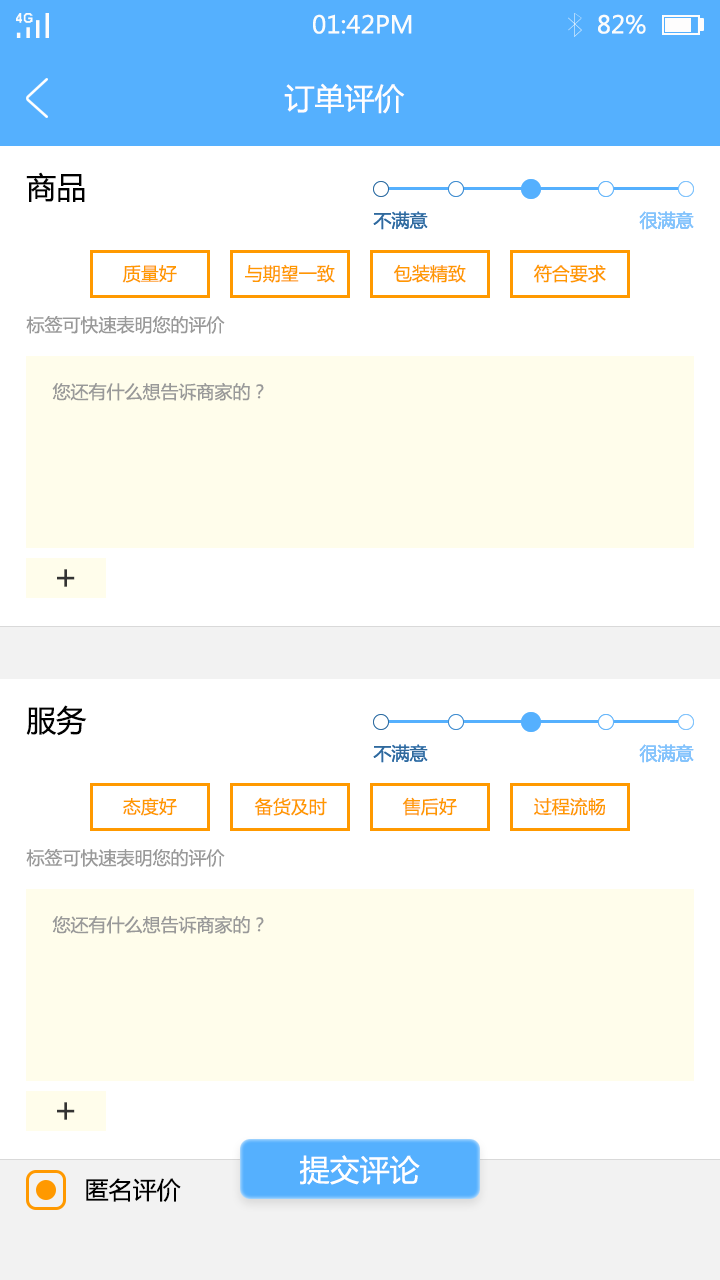
<style>
.page{position:relative;width:720px;height:1280px;background:#ffffff}
.page>*{position:absolute;margin:0}
.t1{font:24px "MicrosoftYaHei";color:#fbfdfc}
.t2{font:30px "MicrosoftYaHei";color:#fffefe}
.t3{font:30px "MicrosoftYaHei";color:#000000}
.t4{font:18px "MicrosoftYaHei";color:#326999}
.t5{font:18px "MicrosoftYaHei";color:#84c4fc}
.t6{font:18px "MicrosoftYaHei";color:#ff9900}
.t7{font:18px "MicrosoftYaHei";color:#999999}
.t8{font:34.4px "MicrosoftYaHei";color:#333333}
.t9{font:30px "MicrosoftYaHei";color:#ffffff}
.t10{font:24px "MicrosoftYaHei";color:#000000}
</style>
<div class="page">
<p class="t1" style="left:313px;top:14px;width:99px;height:20px">01:42PM</p>
<p class="t1" style="left:598px;top:14px;width:48px;height:20px">82%</p>
<p class="t2" style="left:284px;top:83px;width:121px;height:31px">订单评价</p>
<p class="t3" style="left:26px;top:172px;width:59px;height:30px">商品</p>
<p class="t4" style="left:373px;top:211px;width:55px;height:19px">不满意</p>
<p class="t4" style="left:373px;top:211px;width:55px;height:19px">不满意</p>
<p class="t5" style="left:639px;top:211px;width:55px;height:19px">很满意</p>
<p class="t5" style="left:639px;top:211px;width:55px;height:19px">很满意</p>
<p class="t6" style="left:122px;top:265px;width:55px;height:18px">质量好</p>
<p class="t6" style="left:245px;top:264px;width:90px;height:19px">与期望一致</p>
<p class="t6" style="left:394px;top:264px;width:72px;height:19px">包装精致</p>
<p class="t6" style="left:534px;top:264px;width:72px;height:19px">符合要求</p>
<p class="t7" style="left:26px;top:316px;width:199px;height:18px">标签可快速表明您的评价</p>
<p class="t7" style="left:52px;top:382px;width:212px;height:19px">您还有什么想告诉商家的？</p>
<p class="t8" style="left:57px;top:569px;width:18px;height:18px">＋</p>
<p class="t3" style="left:26px;top:705px;width:61px;height:31px">服务</p>
<p class="t4" style="left:373px;top:744px;width:55px;height:19px">不满意</p>
<p class="t4" style="left:373px;top:744px;width:55px;height:19px">不满意</p>
<p class="t5" style="left:639px;top:744px;width:55px;height:19px">很满意</p>
<p class="t5" style="left:639px;top:744px;width:55px;height:19px">很满意</p>
<p class="t6" style="left:123px;top:797px;width:54px;height:19px">态度好</p>
<p class="t6" style="left:254px;top:797px;width:73px;height:19px">备货及时</p>
<p class="t6" style="left:402px;top:797px;width:55px;height:19px">售后好</p>
<p class="t6" style="left:534px;top:797px;width:71px;height:19px">过程流畅</p>
<p class="t7" style="left:26px;top:849px;width:199px;height:18px">标签可快速表明您的评价</p>
<p class="t7" style="left:52px;top:915px;width:212px;height:19px">您还有什么想告诉商家的？</p>
<p class="t8" style="left:57px;top:1102px;width:18px;height:18px">＋</p>
<p class="t9" style="left:300px;top:1155px;width:120px;height:30px">提交评论</p>
<p class="t10" style="left:86px;top:1178px;width:95px;height:24px">匿名评价</p>
</div>
